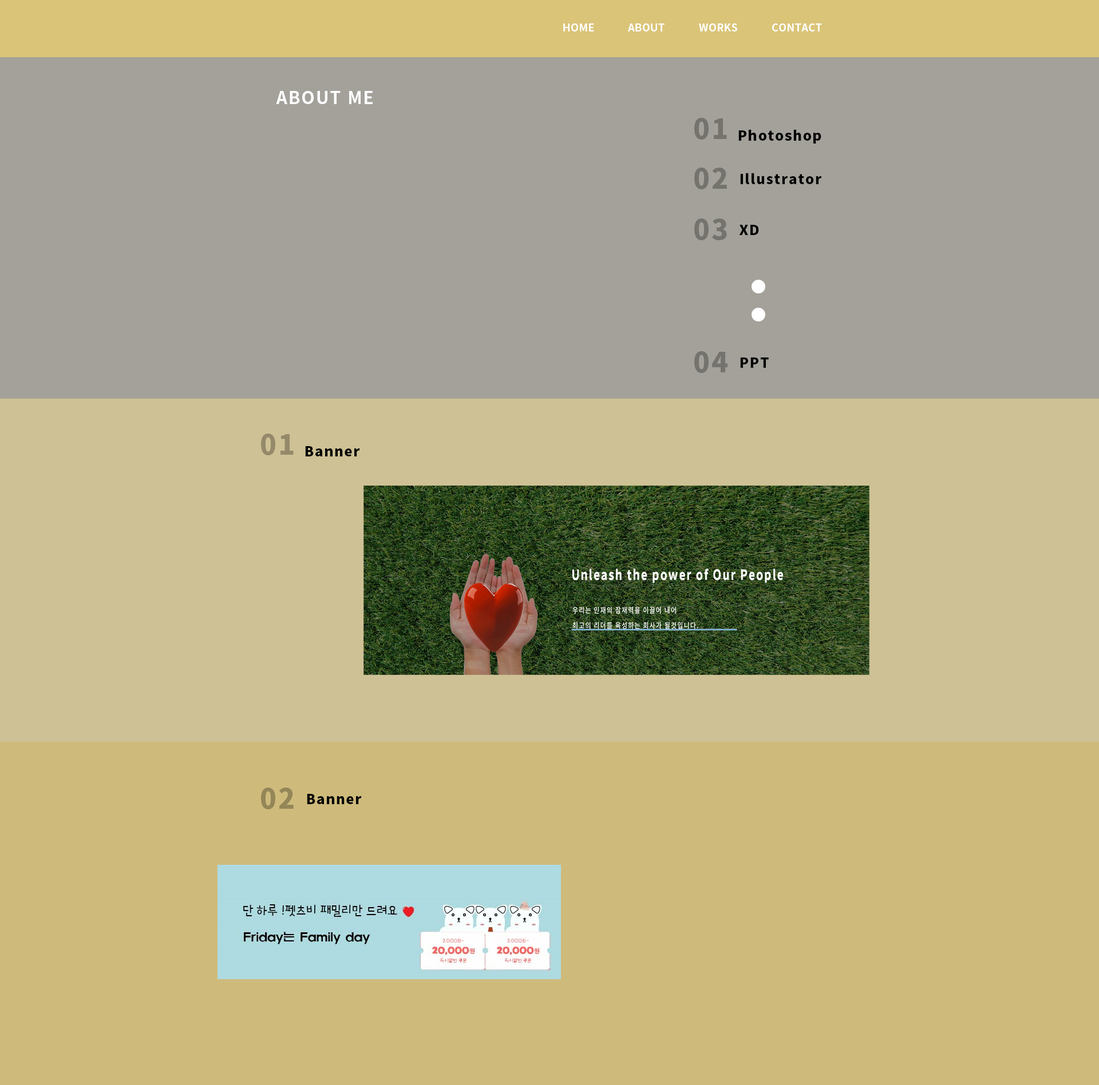
<style>
.page{position:relative;width:1099px;height:1085px;background:#a3a19a}
.page>*{position:absolute;margin:0}
.t1{font:10.3px "NotoSansCJKkr-Bold";letter-spacing:0.025em;color:#ffffff}
.t2{font:17.2px "NotoSansCJKkr-Bold";letter-spacing:0.075em;color:#ffffff}
.t3{font:27.5px "NotoSansCJKkr-Black";letter-spacing:0.075em;color:#74736d}
.t4{font:13.7px "NotoSansCJKkr-Black";letter-spacing:0.075em;color:#000000}
.t5{font:27.5px "NotoSansCJKkr-Black";letter-spacing:0.075em;color:#948a6a}
.t6{font:27.5px "NotoSansCJKkr-Black";letter-spacing:0.075em;color:#948657}
</style>
<div class="page">
<p class="t1" style="left:563px;top:23px;width:31px;height:8px">HOME</p>
<p class="t1" style="left:628px;top:23px;width:36px;height:8px">ABOUT</p>
<p class="t1" style="left:699px;top:23px;width:38px;height:8px">WORKS</p>
<p class="t1" style="left:772px;top:23px;width:50px;height:8px">CONTACT</p>
<p class="t2" style="left:276px;top:91px;width:96px;height:13px">ABOUT ME</p>
<p class="t3" style="left:694px;top:118px;width:33px;height:22px">01</p>
<p class="t4" style="left:738px;top:129px;width:83px;height:15px">Photoshop</p>
<p class="t3" style="left:694px;top:168px;width:33px;height:21px">02</p>
<p class="t4" style="left:740px;top:173px;width:82px;height:11px">Illustrator</p>
<p class="t3" style="left:694px;top:219px;width:33px;height:21px">03</p>
<p class="t4" style="left:739px;top:225px;width:20px;height:10px">XD</p>
<p class="t3" style="left:694px;top:351px;width:33px;height:22px">04</p>
<p class="t4" style="left:740px;top:358px;width:28px;height:10px">PPT</p>
<p class="t5" style="left:261px;top:434px;width:33px;height:21px">01</p>
<p class="t4" style="left:305px;top:446px;width:55px;height:11px">Banner</p>
<p class="t6" style="left:261px;top:788px;width:33px;height:22px">02</p>
<p class="t4" style="left:307px;top:794px;width:55px;height:10px">Banner</p>
</div>
